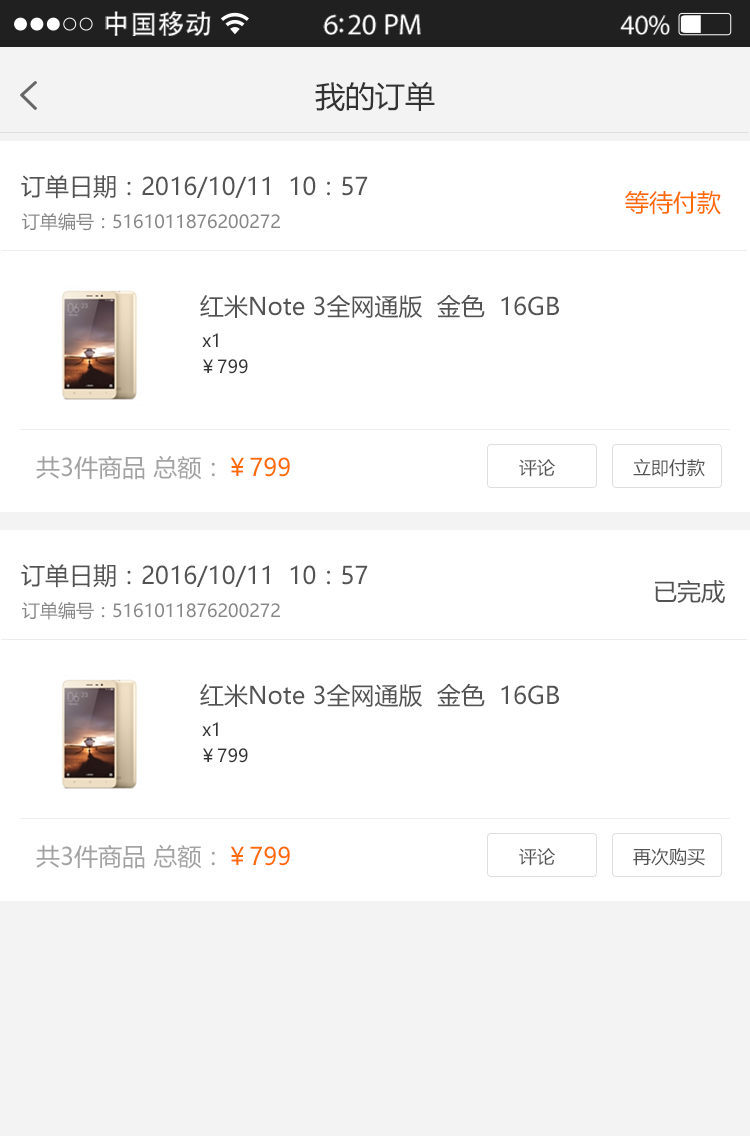
<style>
.page{position:relative;width:750px;height:1136px;background:#ffffff}
.page>*{position:absolute;margin:0}
.t1{font:27px "AdobeHeitiStd-Regular";letter-spacing:0.02em;color:#ffffff}
.t2{font:29.4px "MyriadPro-Regular";letter-spacing:-0.02em;color:#ffffff}
.t3{font:28.2px "MyriadPro-Regular";letter-spacing:-0.02em;color:#ffffff}
.t4{font:30px "MicrosoftYaHei";color:#333333}
.t5{font:24px "MicrosoftYaHei";color:#535353}
.t6{font:24px "MicrosoftYaHei";color:#ff6b00}
.t7{font:18px "MicrosoftYaHei";color:#878787}
.t8{font:18px "MicrosoftYaHei";color:#333333}
.t9{font:24px "MicrosoftYaHei";color:#a2a2a2}
.t10{font:18px "MicrosoftYaHei";color:#535353}
</style>
<div class="page">
<p class="t1" style="left:105px;top:11px;width:106px;height:25px">中国移动</p>
<p class="t2" style="left:323px;top:14px;width:98px;height:21px">6:20 PM</p>
<p class="t3" style="left:620px;top:15px;width:50px;height:20px">40%</p>
<p class="t4" style="left:315px;top:81px;width:120px;height:30px">我的订单</p>
<p class="t5" style="left:21px;top:175px;width:347px;height:24px">订单日期：2016/10/11  10：57</p>
<p class="t6" style="left:625px;top:190px;width:96px;height:25px">等待付款</p>
<p class="t7" style="left:22px;top:212px;width:258px;height:19px">订单编号：5161011876200272</p>
<p class="t5" style="left:200px;top:294px;width:359px;height:24px">红米Note 3全网通版  金色  16GB</p>
<p class="t8" style="left:202px;top:333px;width:16px;height:14px">x1</p>
<p class="t8" style="left:203px;top:359px;width:45px;height:15px">￥799</p>
<p class="t9" style="left:36px;top:455px;width:254px;height:25px">共3件商品 总额：<span class="t6">￥799</span></p>
<p class="t10" style="left:519px;top:459px;width:36px;height:18px">评论</p>
<p class="t10" style="left:633px;top:458px;width:72px;height:19px">立即付款</p>
<p class="t5" style="left:21px;top:564px;width:347px;height:24px">订单日期：2016/10/11  10：57</p>
<p class="t5" style="left:655px;top:580px;width:70px;height:23px">已完成</p>
<p class="t7" style="left:22px;top:601px;width:258px;height:19px">订单编号：5161011876200272</p>
<p class="t5" style="left:200px;top:683px;width:359px;height:24px">红米Note 3全网通版  金色  16GB</p>
<p class="t8" style="left:202px;top:722px;width:16px;height:14px">x1</p>
<p class="t8" style="left:203px;top:748px;width:45px;height:15px">￥799</p>
<p class="t9" style="left:36px;top:844px;width:254px;height:25px">共3件商品 总额：<span class="t6">￥799</span></p>
<p class="t10" style="left:519px;top:848px;width:36px;height:18px">评论</p>
<p class="t10" style="left:633px;top:848px;width:72px;height:18px">再次购买</p>
</div>
